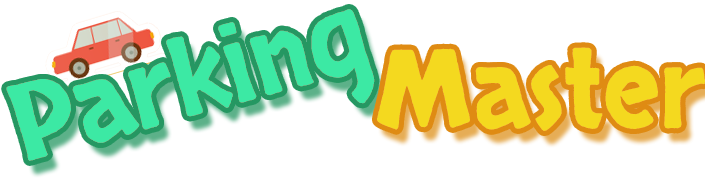
<style>
.page{position:relative;width:705px;height:187px;background:#ffffff}
.page>*{position:absolute;margin:0}
.t1{font:106.4px "Skranji";color:#3ce9a4}
.t2{font:106.7px "Skranji";color:#f4d91f}
</style>
<div class="page">
<p class="t1" style="left:6px;top:9px;width:369px;height:152px;rotate:-15deg">Parking</p>
<p class="t2" style="left:377px;top:47px;width:328px;height:84px">Master</p>
</div>
